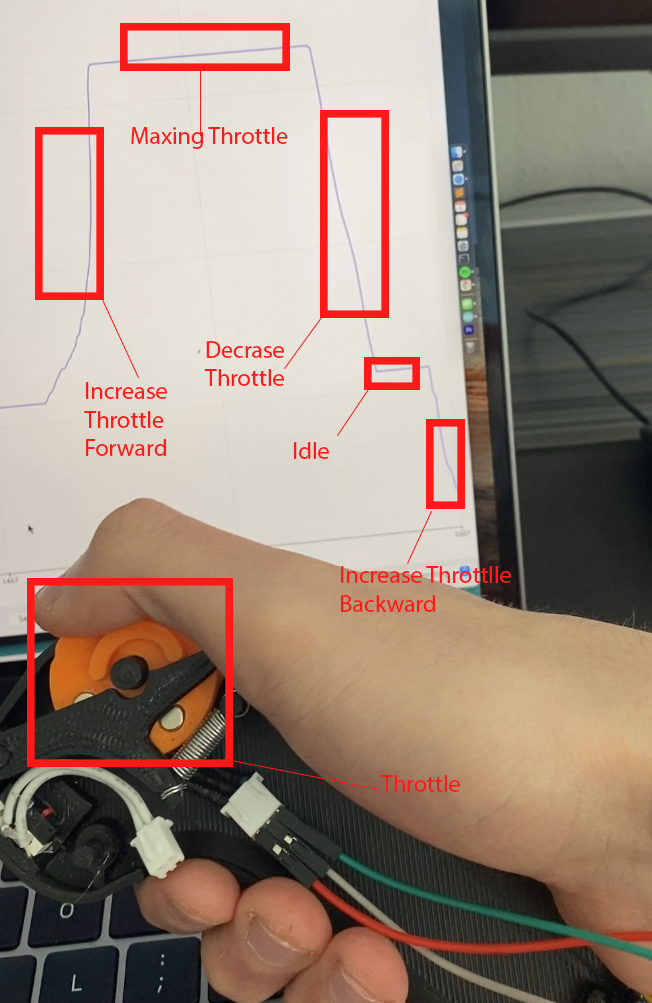
<style>
.page{position:relative;width:652px;height:1003px}
.page>*{position:absolute;margin:0}
.t1{font:24px "MyriadPro-Regular";color:#ff1919}
</style>
<div class="page">
<p class="t1" style="left:131px;top:127px;width:157px;height:22px">Maxing Throttle</p>
<p class="t1" style="left:204px;top:341px;width:80px;height:45px">Decrase <br>Throttle</p>
<p class="t1" style="left:84px;top:382px;width:83px;height:74px">Increase Throttle <br>Forward</p>
<p class="t1" style="left:294px;top:442px;width:35px;height:17px">Idle</p>
<p class="t1" style="left:341px;top:566px;width:170px;height:46px">Increase Throttlle<br>Backward</p>
<p class="t1" style="left:380px;top:775px;width:80px;height:17px">Throttle</p>
</div>
